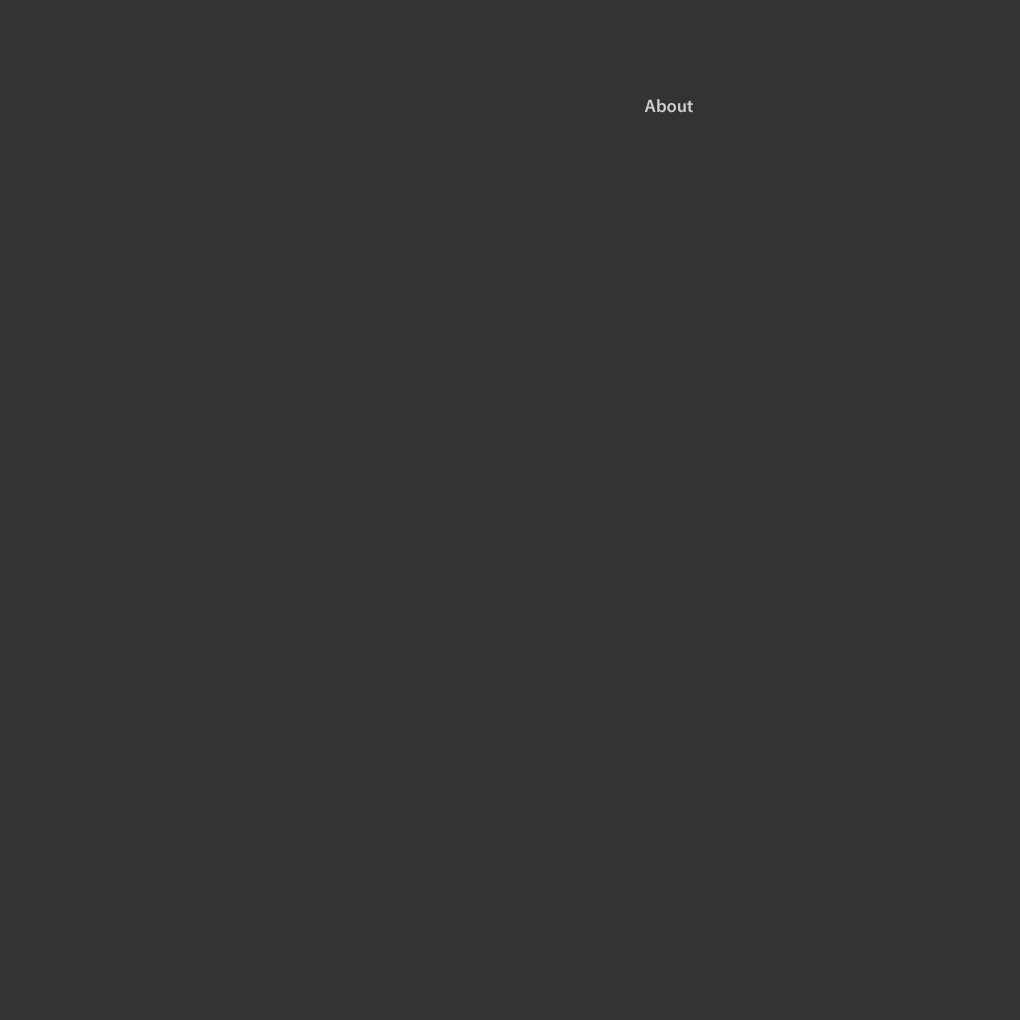
<style>
.page{position:relative;width:1020px;height:1020px;background:#333333}
.page>*{position:absolute;margin:0}
.t1{font:18px "MyriadPro-Semibold";color:#cccccc}
</style>
<div class="page">
<p class="t1" style="left:644px;top:99px;width:49px;height:14px">About</p>
</div>
